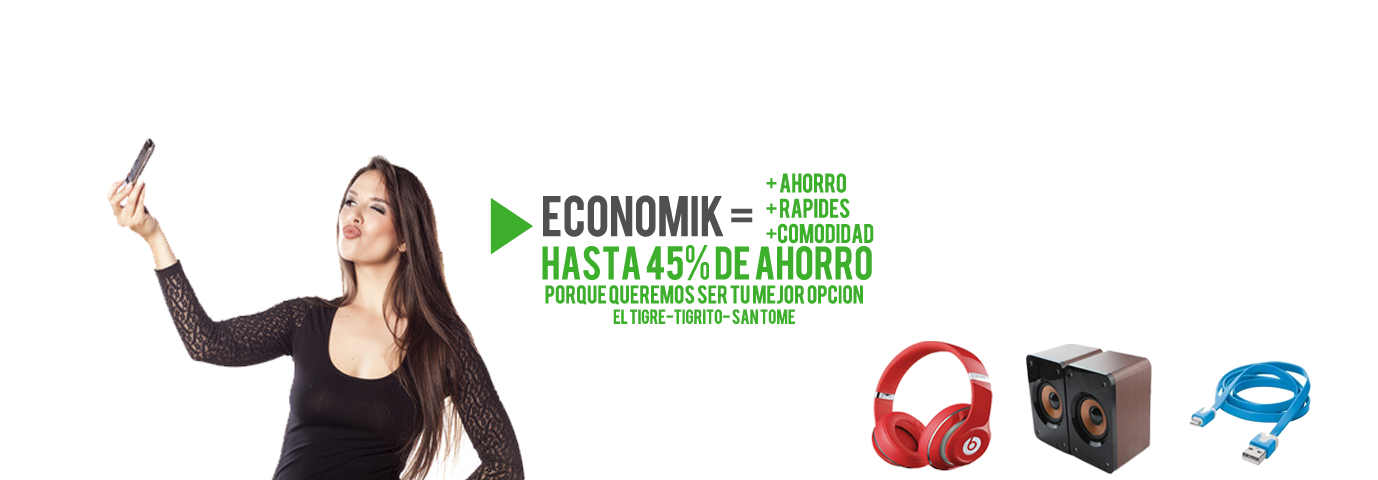
<style>
.page{position:relative;width:1378px;height:480px;background:#ffffff}
.page>*{position:absolute;margin:0}
.t1{font:21px "Bebas";color:#3daf2c;text-transform:uppercase}
.t2{font:45px "Bebas";color:#505050;text-transform:uppercase}
.t3{font:37px "Bebas";color:#3daf2c;text-transform:uppercase}
.t4{font:20px "Bebas";color:#3daf2c;text-transform:uppercase}
.t5{font:16px "Bebas";color:#3daf2c;text-transform:uppercase}
</style>
<div class="page">
<p class="t1" style="left:766px;top:173px;width:108px;height:71px">+ ahorro<br>+ rapides<br>+comodidad</p>
<p class="t2" style="left:543px;top:195px;width:210px;height:42px">economik =</p>
<p class="t3" style="left:542px;top:245px;width:330px;height:36px">hasta 45% de ahorro</p>
<p class="t4" style="left:545px;top:285px;width:318px;height:20px">porque queremos ser tu mejor opcion</p>
<p class="t5" style="left:613px;top:309px;width:182px;height:15px">el tigre-tigrito- san tome</p>
</div>
